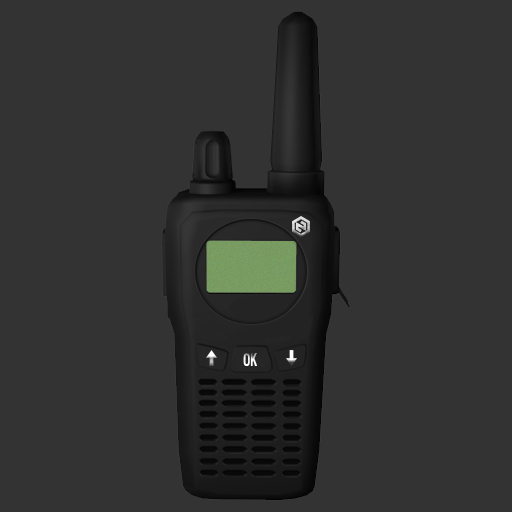
<style>
.page{position:relative;width:512px;height:512px;background:#333333}
.page>*{position:absolute;margin:0}
.t1{font:14.4px "Oswald-Regular";color:#ffffff;scale:0.83 1}
</style>
<div class="page">
<p class="t1" style="left:243px;top:353px;width:14px;height:13px">OK</p>
</div>
